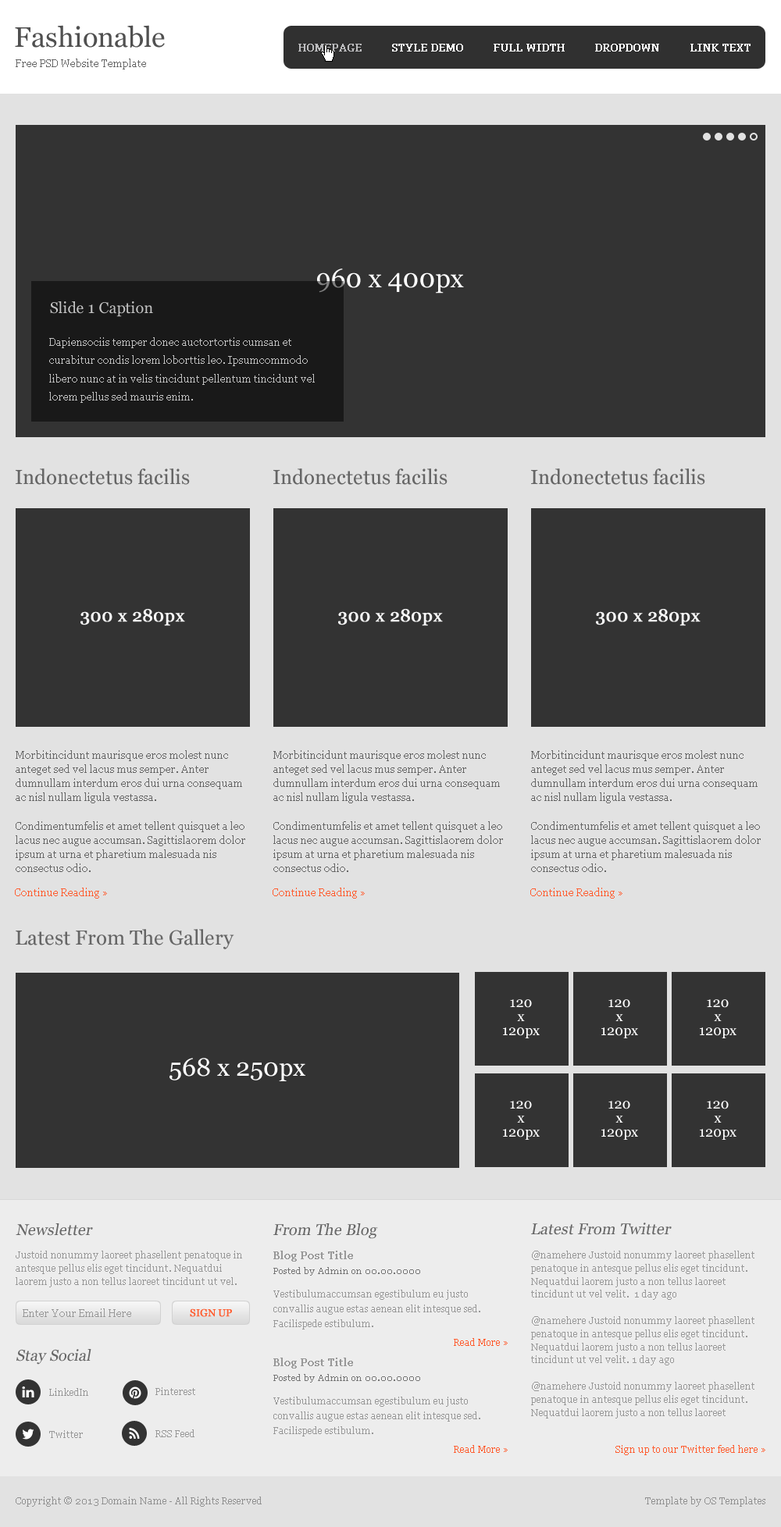
<style>
.page{position:relative;width:781px;height:1527px;background:#333333}
.page>*{position:absolute;margin:0}
.t1{font:28.1px "Georgia";color:#505050}
.t2{font:10.2px "Georgia";color:#bdbdbf;font-weight:bold}
.t3{font:10.2px "Georgia";color:#ffffff;font-weight:bold}
.t4{font:10.2px "Georgia";color:#666666}
.t5{font:26.5px "Georgia";color:#ffffff}
.t6{font:15.6px "Georgia";color:#c2c2c2}
.t7{font:10.2px/18.3px "Georgia";color:#c1c1c1}
.t8{font:20.3px "Georgia";color:#666666}
.t9{font:17.6px "Georgia";color:#f8f8f8;font-weight:bold}
.t10{font:10.2px/14.2px "Georgia";color:#666666}
.t11{font:10.2px "Georgia";color:#ff5d30}
.t12{font:14.1px/14.1px "Georgia";color:#ffffff}
.t13{font:25px "Georgia";color:#ffffff}
.t14{font:15.6px "Georgia";color:#666666;font-style:italic}
.t15{font:9.4px/13.1px "Georgia";color:#989898}
.t16{font:10.2px "Georgia";color:#989898;font-weight:bold}
.t17{font:8.6px "Georgia";color:#757575}
.t18{font:9.4px/15px "Georgia";color:#989898}
.t19{font:10.2px "Georgia";color:#989898}
.t20{font:10.2px "Georgia";color:#ff5d30;text-transform:uppercase;font-weight:bold}
.t21{font:9.4px "Georgia";color:#ff5d30}
.t22{font:9.4px "Georgia";color:#989898}
.t23{font:9.4px "Georgia";color:#919191}
</style>
<div class="page">
<p class="t1" style="left:15px;top:25px;width:150px;height:23px">Fashionable</p>
<p class="t2" style="left:298px;top:44px;width:64px;height:8px">HOMEPAGE</p>
<p class="t3" style="left:392px;top:44px;width:71px;height:8px">STYLE DEMO</p>
<p class="t3" style="left:493px;top:44px;width:72px;height:8px">FULL WIDTH</p>
<p class="t3" style="left:595px;top:44px;width:64px;height:8px">DROPDOWN</p>
<p class="t3" style="left:690px;top:44px;width:60px;height:8px">LINK TEXT</p>
<p class="t4" style="left:16px;top:59px;width:130px;height:10px">Free PSD Website Template</p>
<p class="t5" style="left:317px;top:269px;width:147px;height:25px">960 x 400px</p>
<p class="t6" style="left:50px;top:301px;width:103px;height:16px">Slide 1 Caption</p>
<p class="t7" style="left:49px;top:337px;width:266px;height:66px">Dapiensociis temper donec auctortortis cumsan et curabitur condis lorem loborttis leo. Ipsumcommodo libero nunc at in velis tincidunt pellentum tincidunt vel lorem pellus sed mauris enim.</p>
<p class="t8" style="left:16px;top:468px;width:174px;height:17px">Indonectetus facilis</p>
<p class="t8" style="left:273px;top:468px;width:174px;height:17px">Indonectetus facilis</p>
<p class="t8" style="left:531px;top:468px;width:174px;height:17px">Indonectetus facilis</p>
<p class="t9" style="left:80px;top:609px;width:105px;height:17px">300 x 280px</p>
<p class="t9" style="left:338px;top:609px;width:105px;height:17px">300 x 280px</p>
<p class="t9" style="left:596px;top:609px;width:104px;height:17px">300 x 280px</p>
<p class="t10" style="left:16px;top:750px;width:229px;height:122px">Morbitincidunt maurisque eros molest nunc anteget sed vel lacus mus semper. Anter dumnullam interdum eros dui urna consequam ac nisl nullam ligula vestassa. <br><br>Condimentumfelis et amet tellent quisquet a leo lacus nec augue accumsan. Sagittislaorem dolor ipsum at urna et pharetium malesuada nis consectus odio.</p>
<p class="t10" style="left:273px;top:750px;width:230px;height:122px">Morbitincidunt maurisque eros molest nunc anteget sed vel lacus mus semper. Anter dumnullam interdum eros dui urna consequam ac nisl nullam ligula vestassa. <br><br>Condimentumfelis et amet tellent quisquet a leo lacus nec augue accumsan. Sagittislaorem dolor ipsum at urna et pharetium malesuada nis consectus odio.</p>
<p class="t10" style="left:531px;top:750px;width:229px;height:122px">Morbitincidunt maurisque eros molest nunc anteget sed vel lacus mus semper. Anter dumnullam interdum eros dui urna consequam ac nisl nullam ligula vestassa. <br><br>Condimentumfelis et amet tellent quisquet a leo lacus nec augue accumsan. Sagittislaorem dolor ipsum at urna et pharetium malesuada nis consectus odio.</p>
<p class="t11" style="left:15px;top:888px;width:92px;height:11px">Continue Reading »</p>
<p class="t11" style="left:272px;top:888px;width:93px;height:11px">Continue Reading »</p>
<p class="t11" style="left:530px;top:888px;width:92px;height:11px">Continue Reading »</p>
<p class="t8" style="left:16px;top:929px;width:218px;height:20px">Latest From The Gallery</p>
<p class="t12" style="left:503px;top:999px;width:37px;height:39px;text-align:center">120<br>x<br>120px</p>
<p class="t12" style="left:601px;top:999px;width:37px;height:39px;text-align:center">120<br>x<br>120px</p>
<p class="t12" style="left:700px;top:999px;width:36px;height:39px;text-align:center">120<br>x<br>120px</p>
<p class="t13" style="left:169px;top:1058px;width:136px;height:23px">568 x 250px</p>
<p class="t12" style="left:503px;top:1101px;width:37px;height:39px;text-align:center">120<br>x<br>120px</p>
<p class="t12" style="left:601px;top:1101px;width:37px;height:39px;text-align:center">120<br>x<br>120px</p>
<p class="t12" style="left:700px;top:1101px;width:36px;height:39px;text-align:center">120<br>x<br>120px</p>
<p class="t14" style="left:16px;top:1223px;width:77px;height:13px">Newsletter</p>
<p class="t14" style="left:272px;top:1223px;width:106px;height:16px">From The Blog</p>
<p class="t14" style="left:531px;top:1223px;width:140px;height:12px">Latest From Twitter</p>
<p class="t15" style="left:16px;top:1251px;width:226px;height:37px">Justoid nonummy laoreet phasellent penatoque in antesque pellus elis eget tincidunt. Nequatdui laorem justo a non tellus laoreet tincidunt ut vel.</p>
<p class="t16" style="left:273px;top:1251px;width:80px;height:11px">Blog Post Title</p>
<p class="t15" style="left:531px;top:1251px;width:223px;height:168px">@namehere Justoid nonummy laoreet phasellent penatoque in antesque pellus elis eget tincidunt. Nequatdui laorem justo a non tellus laoreet tincidunt ut vel velit.  1 day ago<br><br>@namehere Justoid nonummy laoreet phasellent penatoque in antesque pellus elis eget tincidunt. Nequatdui laorem justo a non tellus laoreet tincidunt ut vel velit. 1 day ago<br><br>@namehere Justoid nonummy laoreet phasellent penatoque in antesque pellus elis eget tincidunt. Nequatdui laorem justo a non tellus laoreet tincidunt ut vel velit.  1 day ago</p>
<p class="t17" style="left:273px;top:1267px;width:147px;height:9px">Posted by Admin on 00.00.0000</p>
<p class="t18" style="left:273px;top:1290px;width:207px;height:40px">Vestibulumaccumsan egestibulum eu justo convallis augue estas aenean elit intesque sed. Facilispede estibulum.</p>
<p class="t19" style="left:23px;top:1309px;width:108px;height:8px">Enter Your Email Here</p>
<p class="t20" style="left:190px;top:1309px;width:42px;height:8px">SIGN UP</p>
<p class="t14" style="left:16px;top:1349px;width:75px;height:16px">Stay Social</p>
<p class="t21" style="left:454px;top:1338px;width:54px;height:8px">Read More »</p>
<p class="t16" style="left:273px;top:1358px;width:80px;height:11px">Blog Post Title</p>
<p class="t17" style="left:273px;top:1374px;width:147px;height:9px">Posted by Admin on 00.00.0000</p>
<p class="t22" style="left:49px;top:1388px;width:39px;height:8px">LinkedIn</p>
<p class="t22" style="left:155px;top:1387px;width:40px;height:8px">Pinterest</p>
<p class="t18" style="left:273px;top:1397px;width:207px;height:40px">Vestibulumaccumsan egestibulum eu justo convallis augue estas aenean elit intesque sed. Facilispede estibulum.</p>
<p class="t22" style="left:49px;top:1430px;width:34px;height:8px">Twitter</p>
<p class="t22" style="left:155px;top:1430px;width:39px;height:7px">RSS Feed</p>
<p class="t21" style="left:454px;top:1445px;width:54px;height:8px">Read More »</p>
<p class="t21" style="left:615px;top:1445px;width:150px;height:10px">Sign up to our Twitter feed here »</p>
<p class="t23" style="left:16px;top:1497px;width:246px;height:10px">Copyright © 2013 Domain Name - All Rights Reserved</p>
<p class="t23" style="left:645px;top:1497px;width:120px;height:10px">Template by OS Templates</p>
</div>
